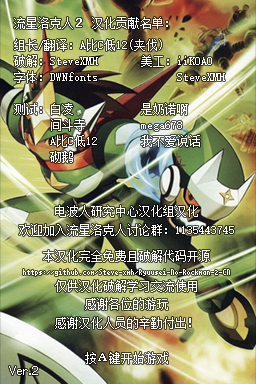
<style>
.page{position:relative;width:256px;height:384px}
.page>*{position:absolute;margin:0}
.t1{font:12px "SimSun";color:#ffffff}
.t2{font:12px/16px "SimSun";color:#ffffff}
.t3{font:12px/18.7px "SimSun";color:#ffffff}
.t4{font:8px/10.7px "GuanZhi";color:#ffffff}
.t5{font:12px "MuzaiPixel";color:#ffffff}
</style>
<div class="page">
<p class="t1" style="left:14px;top:17px;width:154px;height:12px">流星洛克人２ 汉化贡献名单：</p>
<p class="t2" style="left:14px;top:39px;width:148px;height:124px">组长/翻译：A比C低12(夹伐)<br>破解：SteveXMH<br>字体：DWNfonts<br><br>测试：白凌<br>　　　间斗寺<br>　　　A比C低12<br>　　　砌鹅</p>
<p class="t2" style="left:141px;top:55px;width:84px;height:92px">美工：iiKOAO<br>　　　SteveXMH<br><br>是奶诺啊<br>mega678<br>我不爱说话</p>
<p class="t3" style="left:19px;top:205px;width:215px;height:159px;text-align:center">电波人研究中心汉化组汉化<br>欢迎加入流星洛克人讨论群：1135443745<br><br>本汉化完全免费且破解代码开源<br><span class="t4">https://github.com/Steve-xmh/Ryuusei-No-Rockman-2-CN<br></span>仅供汉化破解学习交流使用<br>感谢各位的游玩<br>感谢汉化人员的辛勤付出！<br><br>按Ａ键开始游戏</p>
<p class="t5" style="left:9px;top:366px;width:29px;height:9px">Ver.2</p>
</div>
